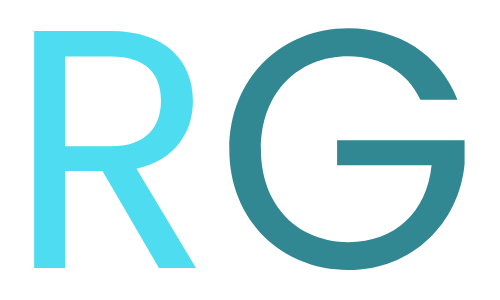
<style>
.page{position:relative;width:500px;height:300px;background:#ffffff}
.page>*{position:absolute;margin:0}
.t1{font:340px "Poppins-Regular";color:#4eddf0}
.t2{font:340px "Poppins-Regular";color:#318893}
</style>
<div class="page">
<p class="t1" style="left:34px;top:28px;width:431px;height:243px">R<span class="t2">G</span></p>
</div>
